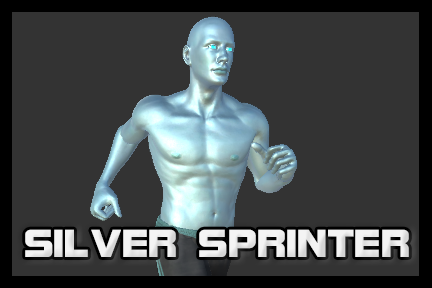
<style>
.page{position:relative;width:432px;height:288px;background:#333333}
.page>*{position:absolute;margin:0}
.t1{font:41.7px "BolsterBold";color:#f3f3f3}
</style>
<div class="page">
<p class="t1" style="left:25px;top:229px;width:384px;height:28px">SILVER SPRINTER</p>
</div>
